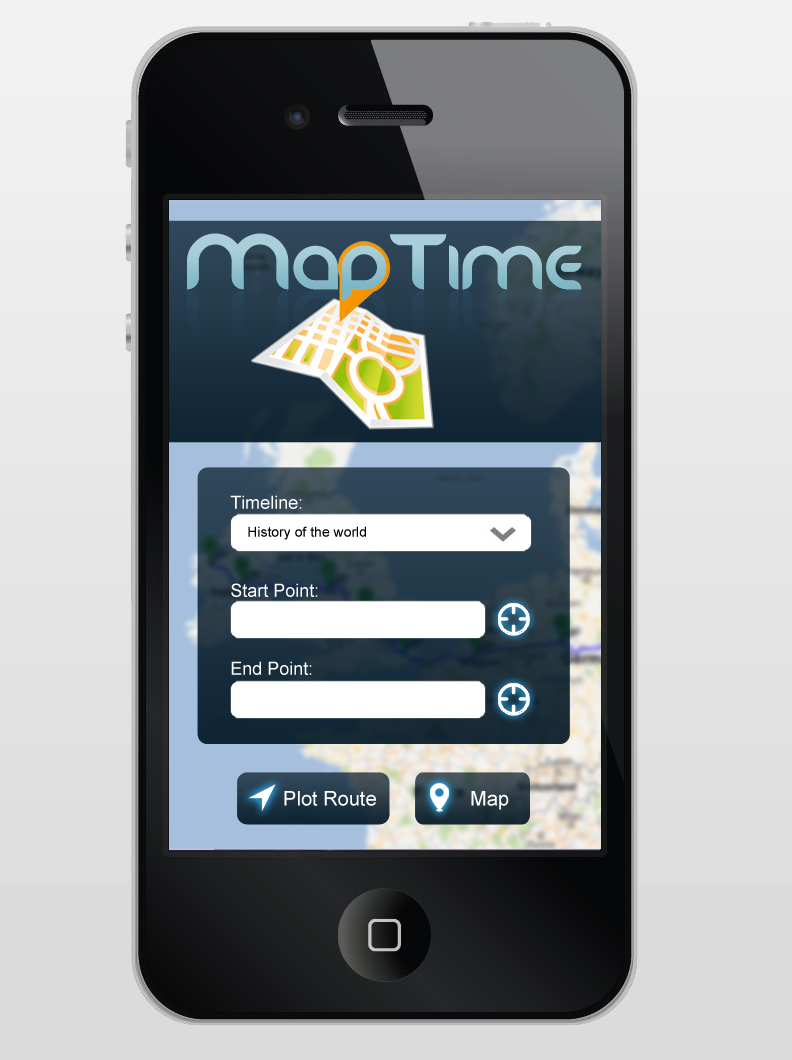
<style>
.page{position:relative;width:792px;height:1060px}
.page>*{position:absolute;margin:0}
.t1{font:54.6px "Danube";color:#a9d0da}
.t2{font:69.7px "Danube";color:#a9d0da}
.t3{font:54.6px "Danube";color:#9bc8d3}
.t4{font:69.7px "Danube";color:#9bc8d3}
.t5{font:18px "ArialMT";color:#ffffff}
.t6{font:14px "ArialMT";color:#000000}
.t7{font:20px "ArialMT";color:#ffffff}
</style>
<div class="page">
<p class="t1" style="left:187px;top:233px;width:395px;height:68px"><span class="t2">M</span>ap<span class="t2">T</span>ime</p>
<p class="t3" style="left:187px;top:233px;width:395px;height:68px"><span class="t4">M</span>ap<span class="t4">T</span>ime</p>
<p class="t5" style="left:230px;top:495px;width:72px;height:14px">Timeline:</p>
<p class="t6" style="left:248px;top:526px;width:118px;height:14px">History of the world</p>
<p class="t5" style="left:231px;top:583px;width:87px;height:14px">Start Point:</p>
<p class="t5" style="left:231px;top:661px;width:81px;height:14px">End Point:</p>
<p class="t7" style="left:284px;top:791px;width:92px;height:15px">Plot Route</p>
<p class="t7" style="left:471px;top:791px;width:38px;height:19px">Map</p>
</div>
